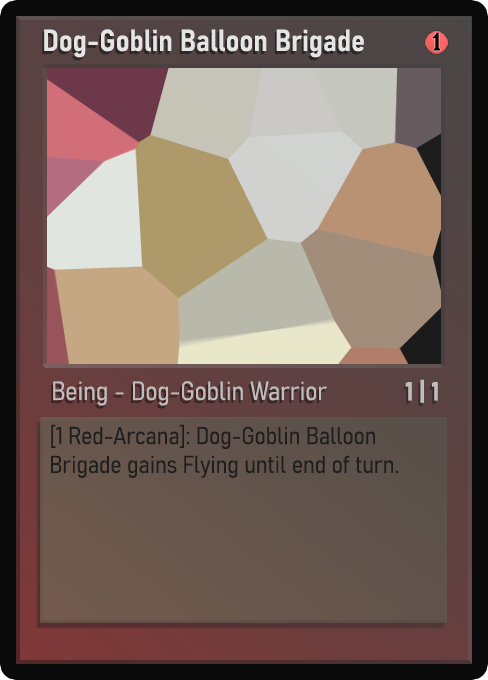
<style>
.page{position:relative;width:488px;height:680px}
.page>*{position:absolute;margin:0}
.t1{font:30px "Bahnschrift-SemiBoldSemiCondensed";color:#f2f2f2;font-weight:bold}
.t2{font:25px "WTRRoycroft";color:#000000;font-weight:bold;scale:1.09 1}
.t3{font:26px "Bahnschrift-LightSemiCondensed";color:#c8c8c8;font-weight:bold}
.t4{font:26px "Bahnschrift-BoldSemiCondensed";color:#c1bdbd;font-weight:bold}
.t5{font:24px "Bahnschrift-LightSemiCondensed";color:#1e1e1e;font-weight:bold}
</style>
<div class="page">
<p class="t1" style="left:44px;top:29px;width:320px;height:29px;opacity:0.9">Dog-Goblin Balloon Brigade</p>
<p class="t2" style="left:432px;top:32px;width:9px;height:19px">1</p>
<p class="t3" style="left:53px;top:381px;width:274px;height:25px;opacity:0.9">Being - Dog-Goblin Warrior</p>
<p class="t4" style="left:405px;top:379px;width:33px;height:24px">1 | 1</p>
<p class="t5" style="left:51px;top:424px;width:347px;height:54px">[1 Red-Arcana]: Dog-Goblin Balloon Brigade gains Flying until end of turn.</p>
</div>
